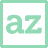
<style>
.page{position:relative;width:48px;height:48px;background:#ffffff}
.page>*{position:absolute;margin:0}
.t1{font:36px "Museo700-Regular";letter-spacing:-0.025em;color:#91dab5}
</style>
<div class="page">
<p class="t1" style="left:6px;top:14px;width:36px;height:20px">az</p>
</div>
